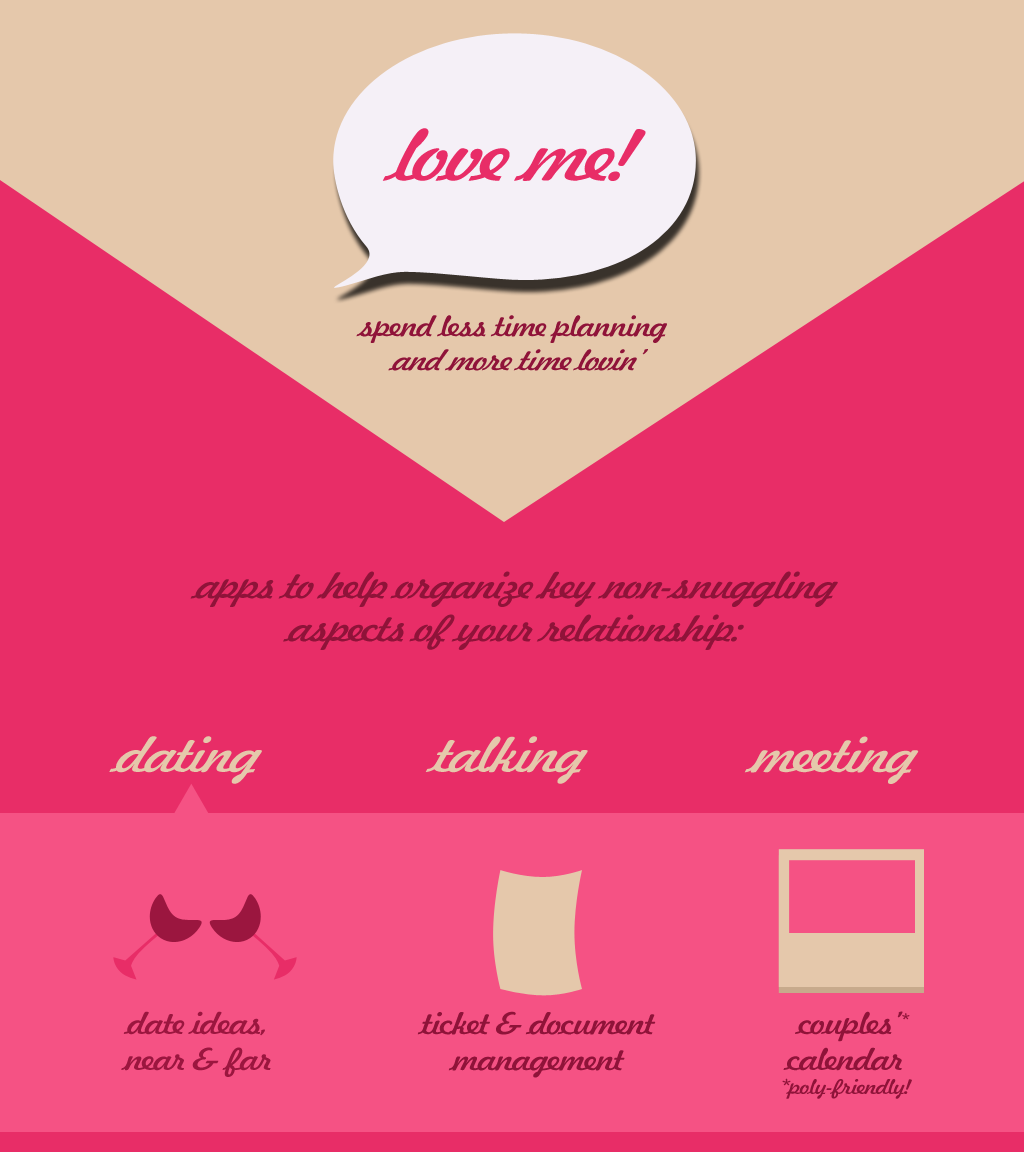
<style>
.page{position:relative;width:1024px;height:1152px;background:#e82d67}
.page>*{position:absolute;margin:0}
.t1{font:70.7px "Jott43WideItalic";letter-spacing:-0.05em;color:#e82d67}
.t2{font:28.3px "Jott43WideNormal";letter-spacing:-0.05em;color:#8f1339}
.t3{font:28.3px "Jott43WideItalic";letter-spacing:-0.05em;color:#8f1339}
.t4{font:36px "Jott43WideItalic";letter-spacing:-0.05em;color:#8f1339}
.t5{font:48px "Jott43WideItalic";letter-spacing:-0.05em;color:#e5c8ab}
.t6{font:30px "Jott43WideNormal";letter-spacing:-0.05em;color:#9b163f}
.t7{font:30px "Jott43WideNormal";letter-spacing:-0.05em;color:#8f1339}
.t8{font:20px "Jott43WideNormal";letter-spacing:-0.05em;color:#8f1339}
.t9{font:18px "Jott43WideNormal";letter-spacing:-0.05em;color:#8f1339}
</style>
<div class="page">
<p class="t1" style="left:382px;top:128px;width:264px;height:53px">love me!</p>
<p class="t2" style="left:356px;top:315px;width:311px;height:56px;text-align:center">spend less time planning<span class="t3"> <br>and more time lovin’</span></p>
<p class="t4" style="left:190px;top:571px;width:648px;height:79px;text-align:center">apps to help organize key non-snuggling<br>aspects of your relationship:</p>
<p class="t5" style="left:109px;top:736px;width:153px;height:48px">dating</p>
<p class="t5" style="left:425px;top:736px;width:163px;height:48px">talking</p>
<p class="t5" style="left:744px;top:736px;width:175px;height:48px">meeting</p>
<p class="t6" style="left:121px;top:1011px;width:150px;height:66px;text-align:center">date ideas,<br>near &amp; far</p>
<p class="t7" style="left:417px;top:1011px;width:239px;height:67px;text-align:center">ticket &amp; document<br>management</p>
<p class="t8" style="left:782px;top:1011px;width:130px;height:88px;text-align:center"><span class="t7">  couples’</span><span class="t9">*<br></span><span class="t7">calendar<br></span>*poly-friendly!</p>
</div>
